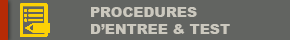
<style>
.page{position:relative;width:290px;height:40px;background:#626461}
.page>*{position:absolute;margin:0}
.t1{font:14px "Arial-Black";color:#cbc8be}
</style>
<div class="page">
<p class="t1" style="left:91px;top:7px;width:139px;height:27px">PROCEDURES <br>D’ENTREE &amp; TEST</p>
</div>
